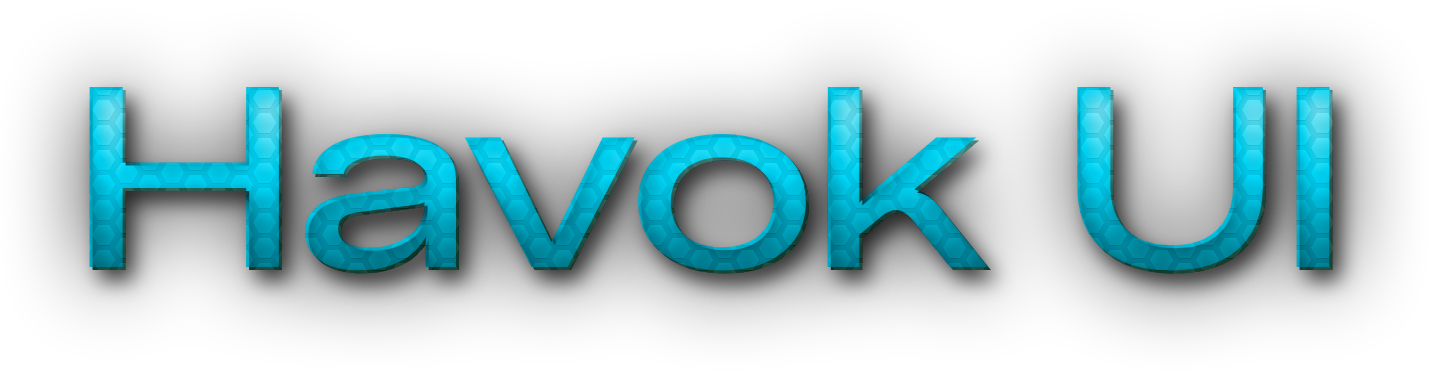
<style>
.page{position:relative;width:1429px;height:372px}
.page>*{position:absolute;margin:0}
.t1{font:252px "ZalandoSansExpanded-Medium"}
</style>
<div class="page">
<p class="t1" style="left:89px;top:87px;width:1241px;height:184px">Havok UI</p>
<p class="t1" style="left:92px;top:90px;width:1241px;height:184px">Havok UI</p>
</div>
